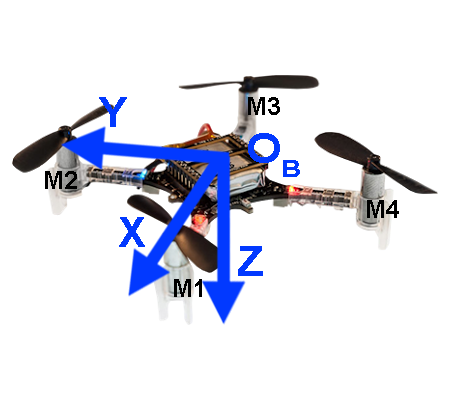
<style>
.page{position:relative;width:450px;height:400px;background:#ffffff}
.page>*{position:absolute;margin:0}
.t1{font:42px "Arial-BoldMT";color:#0239ff}
.t2{font:25px "Arial-BoldMT";color:#000000}
.t3{font:42px "Arial-BoldMT";color:#0239ff;scale:1.1 1}
</style>
<div class="page">
<p class="t1" style="left:99px;top:97px;width:28px;height:30px">Y</p>
<p class="t2" style="left:248px;top:97px;width:32px;height:18px">M3</p>
<p class="t3" style="left:248px;top:133px;width:52px;height:44px">OB</p>
<p class="t2" style="left:45px;top:171px;width:32px;height:18px">M2</p>
<p class="t2" style="left:367px;top:200px;width:32px;height:18px">M4</p>
<p class="t1" style="left:119px;top:217px;width:26px;height:30px">X</p>
<p class="t1" style="left:238px;top:246px;width:25px;height:30px">Z</p>
<p class="t2" style="left:174px;top:279px;width:28px;height:18px">M1</p>
</div>
